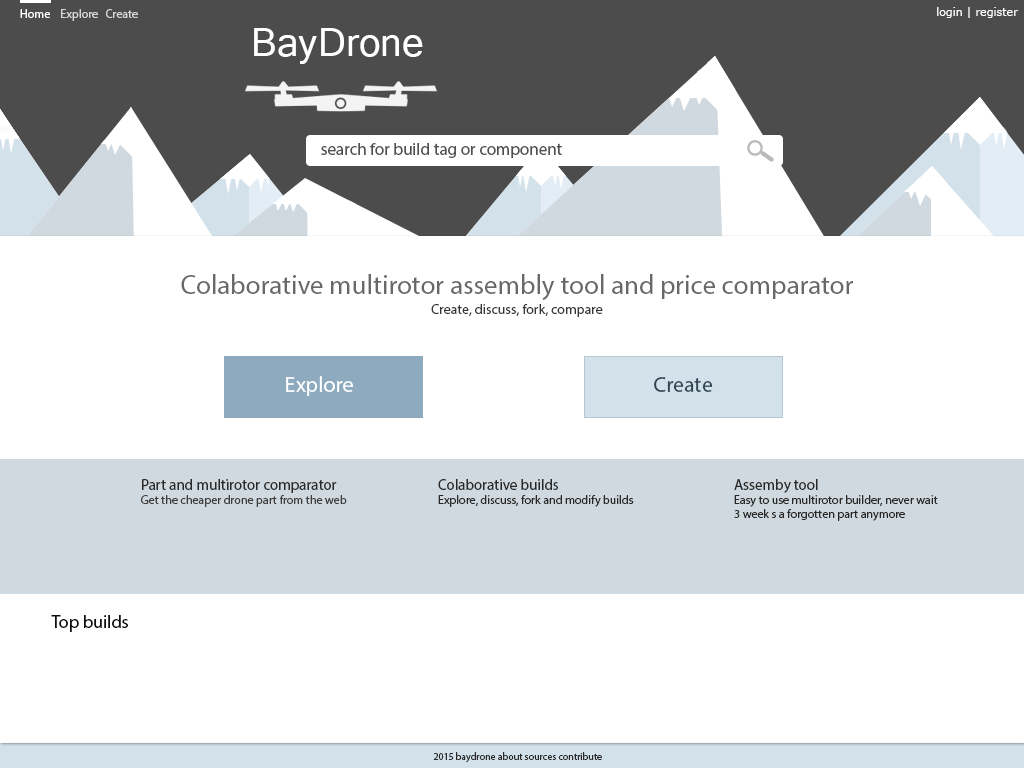
<style>
.page{position:relative;width:1024px;height:768px;background:#ffffff}
.page>*{position:absolute;margin:0}
.t1{font:12px "MyriadPro-Regular";color:#d6d6d6}
.t2{font:12px "MyriadPro-Regular";color:#ffffff}
.t3{font:11px "Verdana";color:#ffffff}
.t4{font:42px "Shruti";color:#ffffff}
.t5{font:17px "MyriadPro-Regular";color:#4f4f4f}
.t6{font:27px "MyriadPro-Regular";color:#686868}
.t7{font:14px "MyriadPro-Regular";color:#363636}
.t8{font:22px "MyriadPro-Regular";color:#ffffff}
.t9{font:22px "MyriadPro-Regular";color:#304554}
.t10{font:12px "MyriadPro-Regular";color:#3d3d3d}
.t11{font:15px "MyriadPro-Regular";color:#282828}
.t12{font:12px "MyriadPro-Regular";color:#282828}
.t13{font:18px "MyriadPro-Regular";color:#0e0e0e}
.t14{font:10px "MyriadPro-Regular";color:#282828}
</style>
<div class="page">
<p class="t1" style="left:20px;top:9px;width:118px;height:12px"><span class="t2">Home    </span>Explore   Create</p>
<p class="t3" style="left:937px;top:7px;width:82px;height:11px">login | register</p>
<p class="t4" style="left:254px;top:28px;width:169px;height:36px">BayDrone</p>
<p class="t5" style="left:321px;top:143px;width:241px;height:15px">search for build tag or component</p>
<p class="t6" style="left:181px;top:274px;width:672px;height:26px">Colaborative multirotor assembly tool and price comparator</p>
<p class="t7" style="left:431px;top:304px;width:172px;height:13px">Create, discuss, fork, compare</p>
<p class="t8" style="left:286px;top:376px;width:67px;height:20px">Explore</p>
<p class="t9" style="left:654px;top:377px;width:59px;height:15px">Create</p>
<p class="t10" style="left:141px;top:479px;width:206px;height:28px"><span class="t11">Part and multirotor comparator<br></span>Get the cheaper drone part from the web</p>
<p class="t12" style="left:438px;top:479px;width:196px;height:28px"><span class="t11">Colaborative builds<br></span>Explore, discuss, fork and modify builds</p>
<p class="t12" style="left:734px;top:479px;width:204px;height:42px"><span class="t11">Assemby tool<br></span>Easy to use multirotor builder, never wait 3 week s a forgotten part anymore</p>
<p class="t13" style="left:51px;top:615px;width:77px;height:17px">Top builds</p>
<p class="t14" style="left:433px;top:752px;width:169px;height:11px">2015 baydrone about sources contribute</p>
</div>
